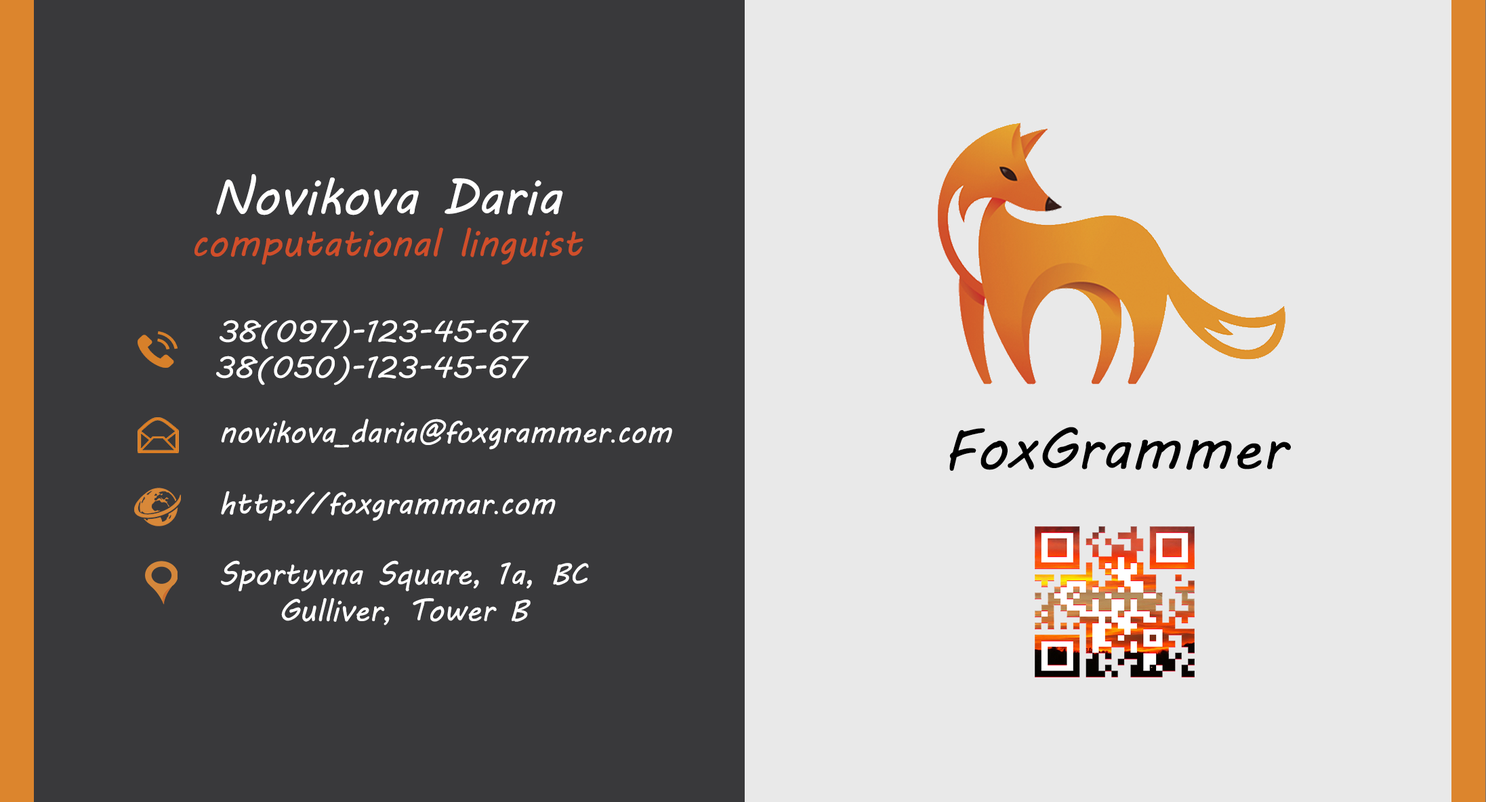
<style>
.page{position:relative;width:1486px;height:802px;background:#39393b}
.page>*{position:absolute;margin:0}
.t1{font:50.8px "MVBoli";color:#ffffff}
.t2{font:50.8px "MyriadPro-Regular";color:#000000}
.t3{font:37.9px "MVBoli";color:#d04e2a}
.t4{font:30.5px "MVBoli";color:#fefefe}
.t5{font:30.5px "TimesNewRomanPSMT";color:#fefefe}
.t6{font:57.6px "MVBoli";color:#000000}
</style>
<div class="page">
<p class="t1" style="left:216px;top:174px;width:347px;height:42px;text-align:center">Novikova Daria<br><span class="t2">c</span></p>
<p class="t3" style="left:194px;top:228px;width:389px;height:37px">computational linguist</p>
<p class="t4" style="left:220px;top:320px;width:309px;height:30px">38(097)-123-45-67</p>
<p class="t4" style="left:216px;top:356px;width:313px;height:30px">38(050)-123-45-67</p>
<p class="t4" style="left:221px;top:419px;width:451px;height:31px">novikova_daria@foxgrammer<span class="t5">.</span>com</p>
<p class="t6" style="left:949px;top:427px;width:342px;height:44px">FoxGrammer</p>
<p class="t4" style="left:221px;top:491px;width:335px;height:30px">http://foxgrammar<span class="t5">.</span>com</p>
<p class="t4" style="left:221px;top:560px;width:368px;height:65px;text-align:center">Sportyvna Square, 1a, BC Gulliver, Tower B</p>
</div>
